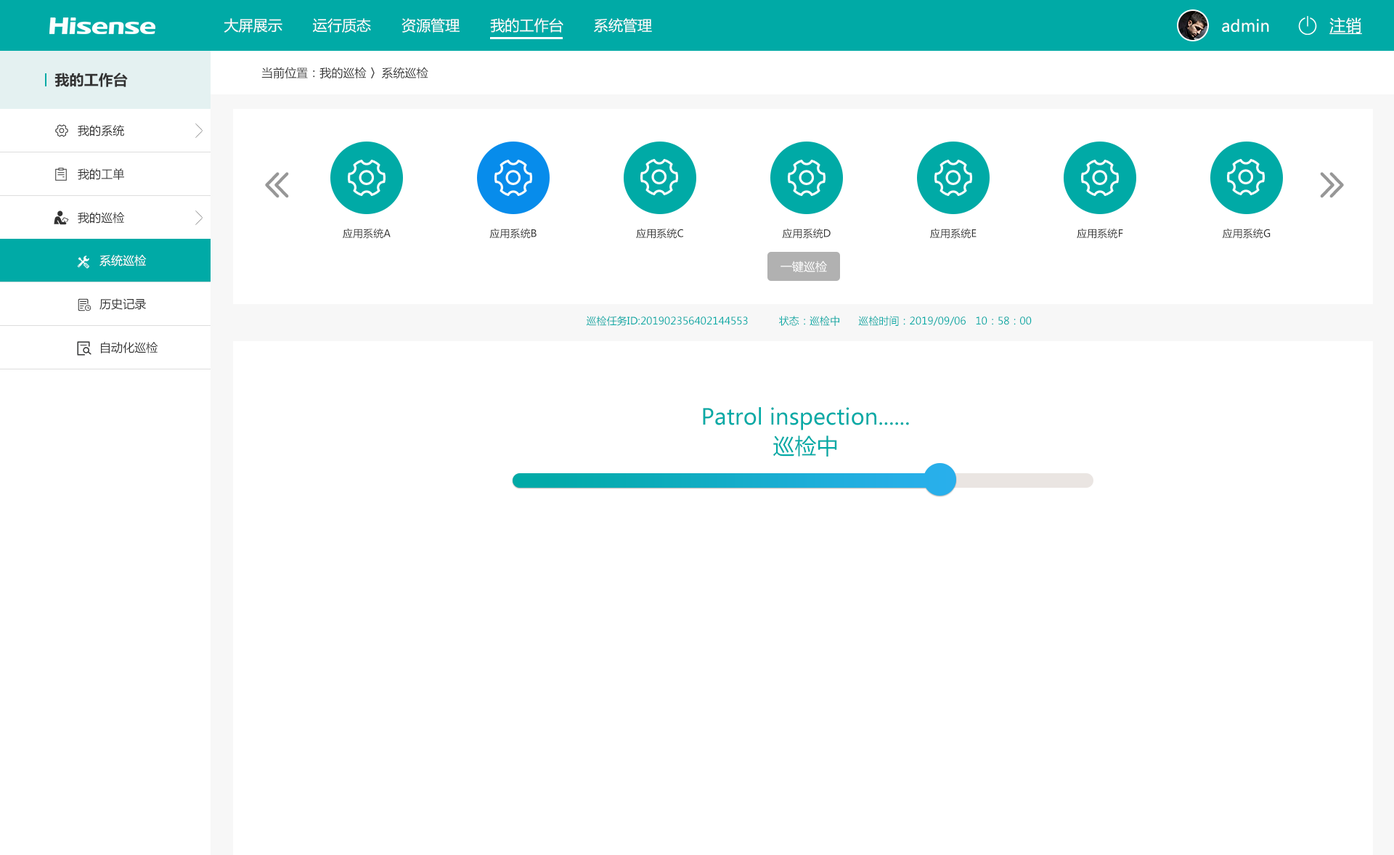
<style>
.page{position:relative;width:1394px;height:855px;background:#ffffff}
.page>*{position:absolute;margin:0}
.t1{font:16px "MicrosoftYaHei";letter-spacing:0.004em;color:#ffffff;text-decoration:underline}
.t2{font:14.5px "MicrosoftYaHei";letter-spacing:0.004em;color:#ffffff}
.t3{font:16px "MicrosoftYaHei";letter-spacing:0.004em;color:#ffffff}
.t4{font:14.5px "MicrosoftYaHei-Bold";letter-spacing:0.004em;color:#333333}
.t5{font:11.6px "MicrosoftYaHei";letter-spacing:0.004em;color:#333333}
.t6{font:10.2px "MicrosoftYaHei";letter-spacing:0.004em;color:#333333}
.t7{font:11.6px "MicrosoftYaHei";letter-spacing:0.004em;color:#ffffff}
.t8{font:10.2px "MicrosoftYaHei";letter-spacing:0.004em;color:#00aaa6}
.t9{font:21.8px/29px "MicrosoftYaHei";letter-spacing:0.004em;color:#00aaa6}
</style>
<div class="page">
<p class="t1" style="left:1329px;top:17px;width:33px;height:17px">注销</p>
<p class="t2" style="left:224px;top:18px;width:428px;height:15px">大屏展示       运行质态       资源管理       我的工作台       系统管理</p>
<p class="t3" style="left:1222px;top:19px;width:47px;height:13px">admin</p>
<p class="t4" style="left:54px;top:73px;width:74px;height:14px">我的工作台</p>
<p class="t5" style="left:261px;top:67px;width:167px;height:12px">当前位置：我的巡检 〉系统巡检</p>
<p class="t5" style="left:78px;top:125px;width:46px;height:12px">我的系统</p>
<p class="t5" style="left:78px;top:168px;width:46px;height:12px">我的工单</p>
<p class="t5" style="left:78px;top:212px;width:47px;height:12px">我的巡检</p>
<p class="t6" style="left:343px;top:228px;width:48px;height:11px">应用系统A</p>
<p class="t6" style="left:489px;top:228px;width:48px;height:11px">应用系统B</p>
<p class="t6" style="left:636px;top:228px;width:47px;height:11px">应用系统C</p>
<p class="t6" style="left:782px;top:228px;width:49px;height:11px">应用系统D</p>
<p class="t6" style="left:930px;top:228px;width:47px;height:11px">应用系统E</p>
<p class="t6" style="left:1077px;top:228px;width:46px;height:11px">应用系统F</p>
<p class="t6" style="left:1222px;top:228px;width:49px;height:11px">应用系统G</p>
<p class="t7" style="left:99px;top:255px;width:48px;height:11px">系统巡检</p>
<p class="t7" style="left:781px;top:261px;width:46px;height:11px">一键巡检</p>
<p class="t5" style="left:99px;top:298px;width:47px;height:12px">历史记录</p>
<p class="t8" style="left:586px;top:316px;width:446px;height:10px">巡检任务ID:201902356402144553          状态：巡检中      巡检时间：2019/09/06   10：58：00</p>
<p class="t5" style="left:101px;top:342px;width:57px;height:12px">自动化巡检</p>
<p class="t9" style="left:703px;top:407px;width:206px;height:50px;text-align:center">Patrol inspection......<br>巡检中</p>
</div>
